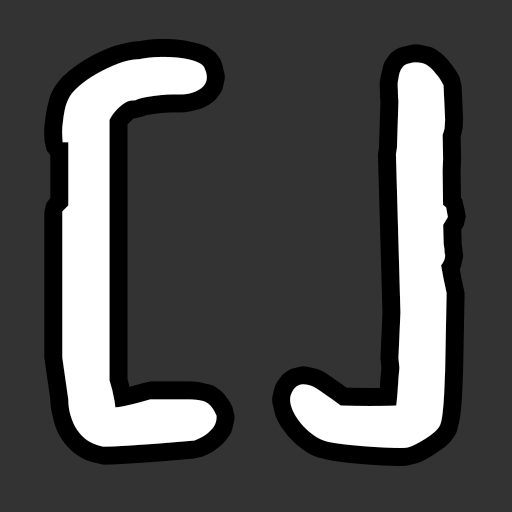
<style>
.page{position:relative;width:512px;height:512px;background:#333333}
.page>*{position:absolute;margin:0}
.t1{font:497.6px "MARI&DAVID";color:#ffffff;font-weight:bold}
</style>
<div class="page">
<p class="t1" style="left:62px;top:56px;width:386px;height:392px">C J</p>
</div>
